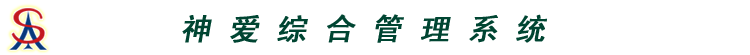
<style>
.page{position:relative;width:750px;height:55px;background:#ffffff}
.page>*{position:absolute;margin:0}
.t1{font:30px "SimHei";letter-spacing:0.56em;color:#004532;font-weight:bold;font-style:italic}
</style>
<div class="page">
<p class="t1" style="left:182px;top:14px;width:365px;height:29px">神爱综合管理系统</p>
</div>
